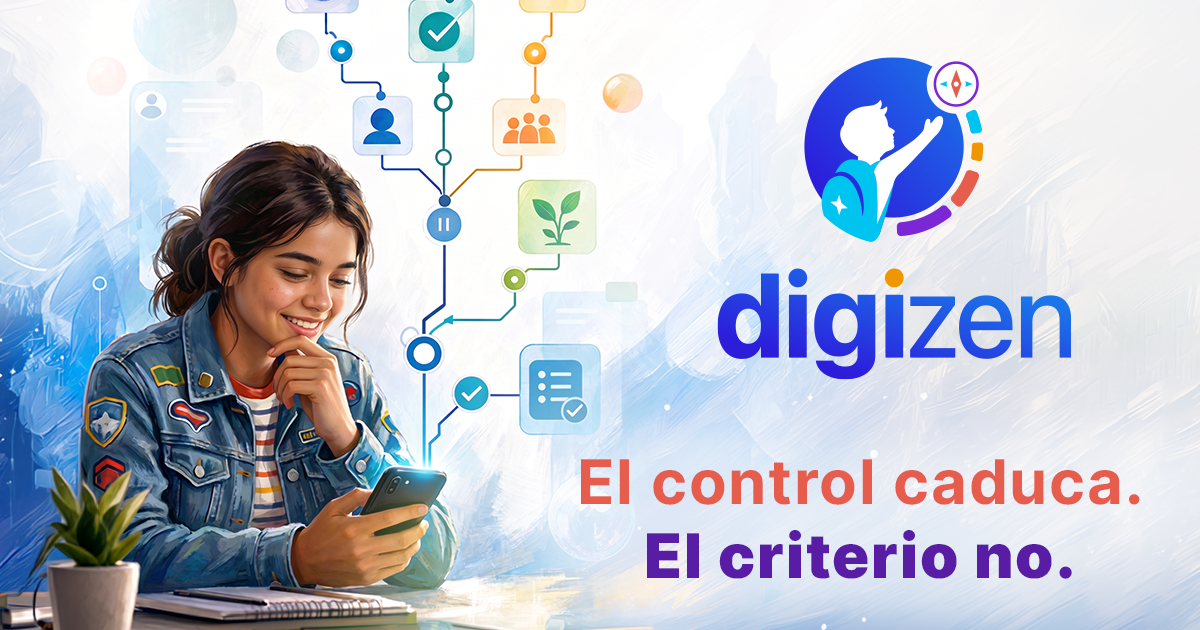
<style>
.page{position:relative;width:1200px;height:630px}
.page>*{position:absolute;margin:0}
.t1{font:61.4px "Inter-Bold";letter-spacing:0.03em;color:#e65c4d}
.t2{font:61.4px "Inter-Black";letter-spacing:0.03em;color:#591ca5}
</style>
<div class="page">
<p class="t1" style="left:581px;top:459px;width:559px;height:120px;text-align:center">El control caduca.<br><span class="t2"> El criterio no.</span></p>
</div>
